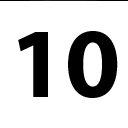
<style>
.page{position:relative;width:128px;height:128px;background:#ffffff}
.page>*{position:absolute;margin:0}
.t1{font:99.7px "MyriadHebrew-Bold";color:#000000}
</style>
<div class="page">
<p class="t1" style="left:18px;top:30px;width:100px;height:67px">10</p>
</div>
